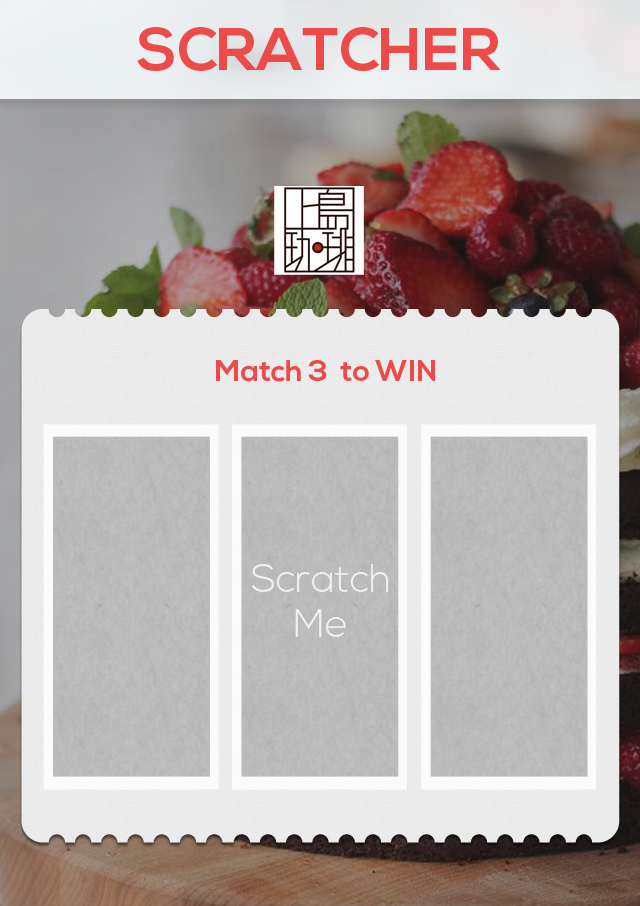
<style>
.page{position:relative;width:640px;height:906px}
.page>*{position:absolute;margin:0}
.t1{font:60px "NexaBold";color:#ed4a4a}
.t2{font:30px "NexaBold";color:#ed4a4a}
.t3{font:39px/45.2px "NexaLight";color:#f1f1f1}
</style>
<div class="page">
<p class="t1" style="left:137px;top:27px;width:363px;height:44px">SCRATCHER</p>
<p class="t2" style="left:216px;top:360px;width:219px;height:22px">Match 3  to WIN</p>
<p class="t3" style="left:252px;top:564px;width:137px;height:73px;text-align:center">Scratch<br>Me</p>
</div>
